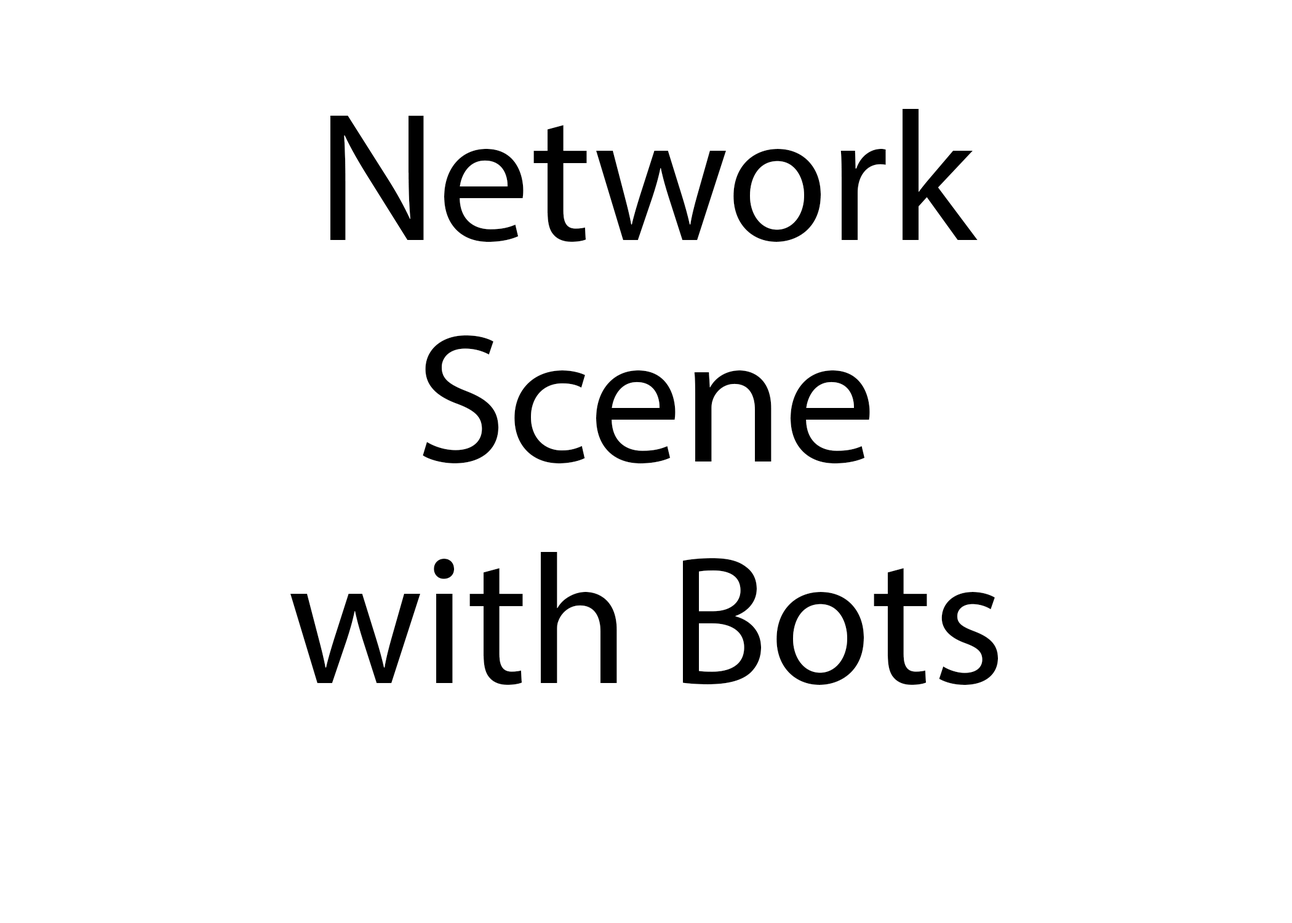
<style>
.page{position:relative;width:1292px;height:923px;background:#ffffff}
.page>*{position:absolute;margin:0}
.t1{font:184.6px "MyriadPro-Regular";color:#000000}
</style>
<div class="page">
<p class="t1" style="left:290px;top:109px;width:708px;height:576px;text-align:center">Network<br>Scene with Bots</p>
</div>
